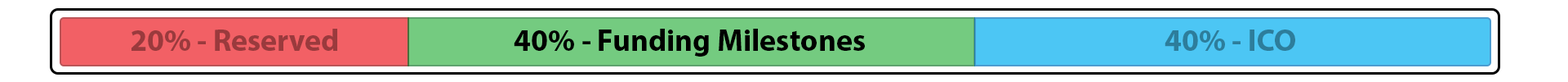
<style>
.page{position:relative;width:1568px;height:82px;background:#ffffff}
.page>*{position:absolute;margin:0}
.t1{font:30.5px "MyriadPro-Bold";color:#9a3a3d}
.t2{font:30.5px "MyriadPro-Bold";color:#000000}
.t3{font:30.5px "MyriadPro-Bold";color:#2d7d9b}
</style>
<div class="page">
<p class="t1" style="left:131px;top:29px;width:206px;height:22px">20% - Reserved</p>
<p class="t2" style="left:514px;top:29px;width:351px;height:27px">40% - Funding Milestones</p>
<p class="t3" style="left:1165px;top:29px;width:130px;height:22px">40% - ICO</p>
</div>
